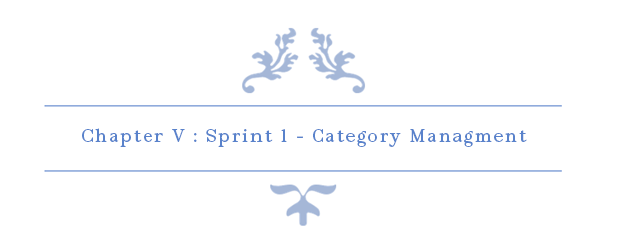
<style>
.page{position:relative;width:622px;height:248px;background:#ffffff}
.page>*{position:absolute;margin:0}
.t1{font:18px "Vega-Regular";letter-spacing:0.1em;color:#5982cb}
</style>
<div class="page">
<p class="t1" style="left:82px;top:128px;width:445px;height:19px">Chapter V : Sprint 1 - Category Managment</p>
</div>
